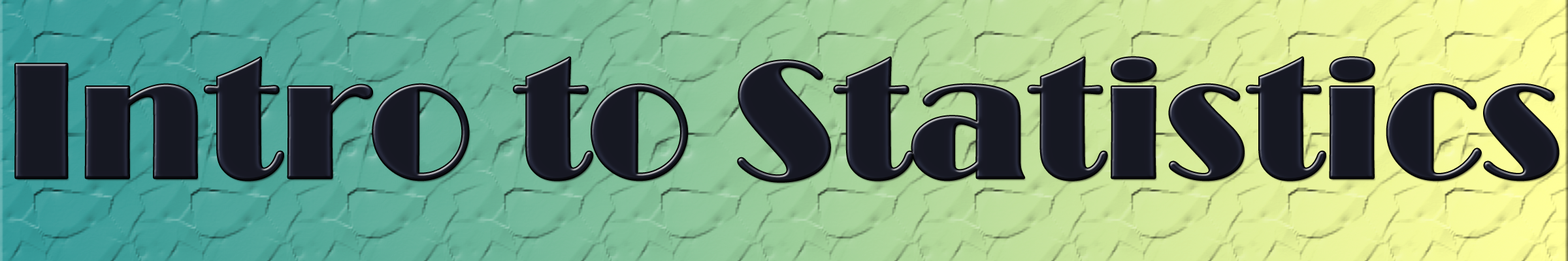
<style>
.page{position:relative;width:1568px;height:261px}
.page>*{position:absolute;margin:0}
.t1{font:170.6px "Broadway";color:#171823}
</style>
<div class="page">
<p class="t1" style="left:16px;top:57px;width:1542px;height:125px">Intro to Statistics</p>
</div>
